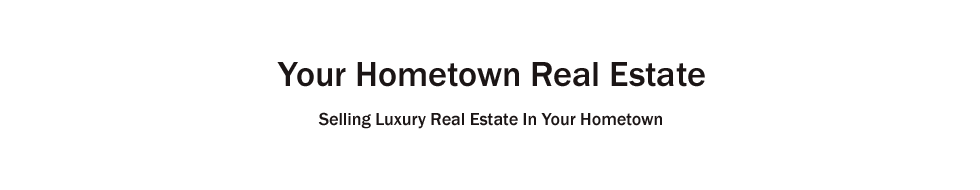
<style>
.page{position:relative;width:980px;height:190px;background:#ffffff}
.page>*{position:absolute;margin:0}
.t1{font:36px "FranklinGothic-Medium";color:#1b1515}
.t2{font:18px "FranklinGothic-Medium";color:#1b1515}
</style>
<div class="page">
<p class="t1" style="left:277px;top:62px;width:428px;height:25px">Your Hometown Real Estate</p>
<p class="t2" style="left:318px;top:112px;width:344px;height:17px">Selling Luxury Real Estate In Your Hometown</p>
</div>
